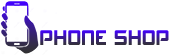
<style>
.page{position:relative;width:170px;height:55px;background:#ffffff}
.page>*{position:absolute;margin:0}
.t1{font:20.2px "UTM-Akashi"}
</style>
<div class="page">
<p class="t1" style="left:40px;top:30px;width:129px;height:15px">PHONE SHOP</p>
</div>
